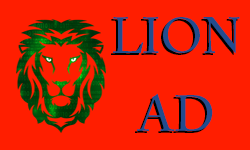
<style>
.page{position:relative;width:250px;height:150px;background:#ff1e00}
.page>*{position:absolute;margin:0}
.t1{font:50px/78px "ACaslonPro-Regular";color:#224c8d;text-transform:uppercase}
.t2{font:50px/78px "ACaslonPro-Regular";color:#000000;text-transform:uppercase}
</style>
<div class="page">
<p class="t1" style="left:113px;top:17px;width:127px;height:114px;text-align:center">lion<br>AD</p>
<p class="t2" style="left:111px;top:19px;width:127px;height:114px;text-align:center">lion<br>AD</p>
</div>
